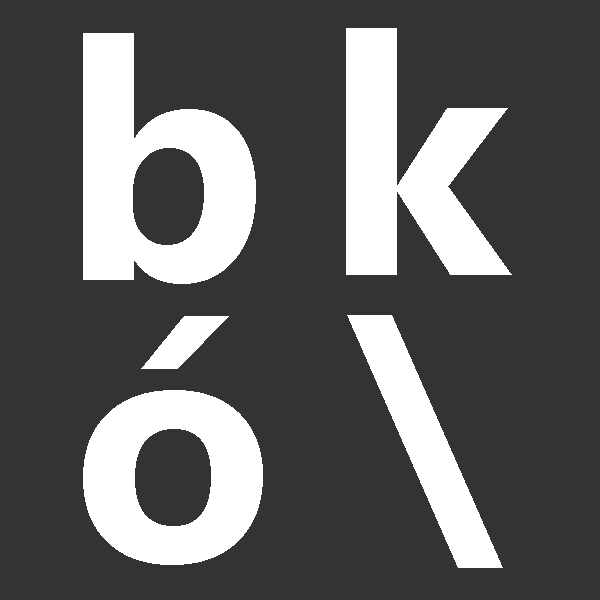
<style>
.page{position:relative;width:600px;height:600px;background:#333333}
.page>*{position:absolute;margin:0}
.t1{font:333.3px "SegoeUI-Bold";color:#ffffff}
.t2{font:309.9px "SegoeUI-Bold";color:#ffffff;scale:1.08 1}
</style>
<div class="page">
<p class="t1" style="left:346px;top:28px;width:166px;height:247px">k</p>
<p class="t1" style="left:83px;top:33px;width:173px;height:251px">b</p>
<p class="t1" style="left:83px;top:316px;width:180px;height:249px">ó</p>
<p class="t2" style="left:347px;top:315px;width:156px;height:253px">\</p>
</div>
